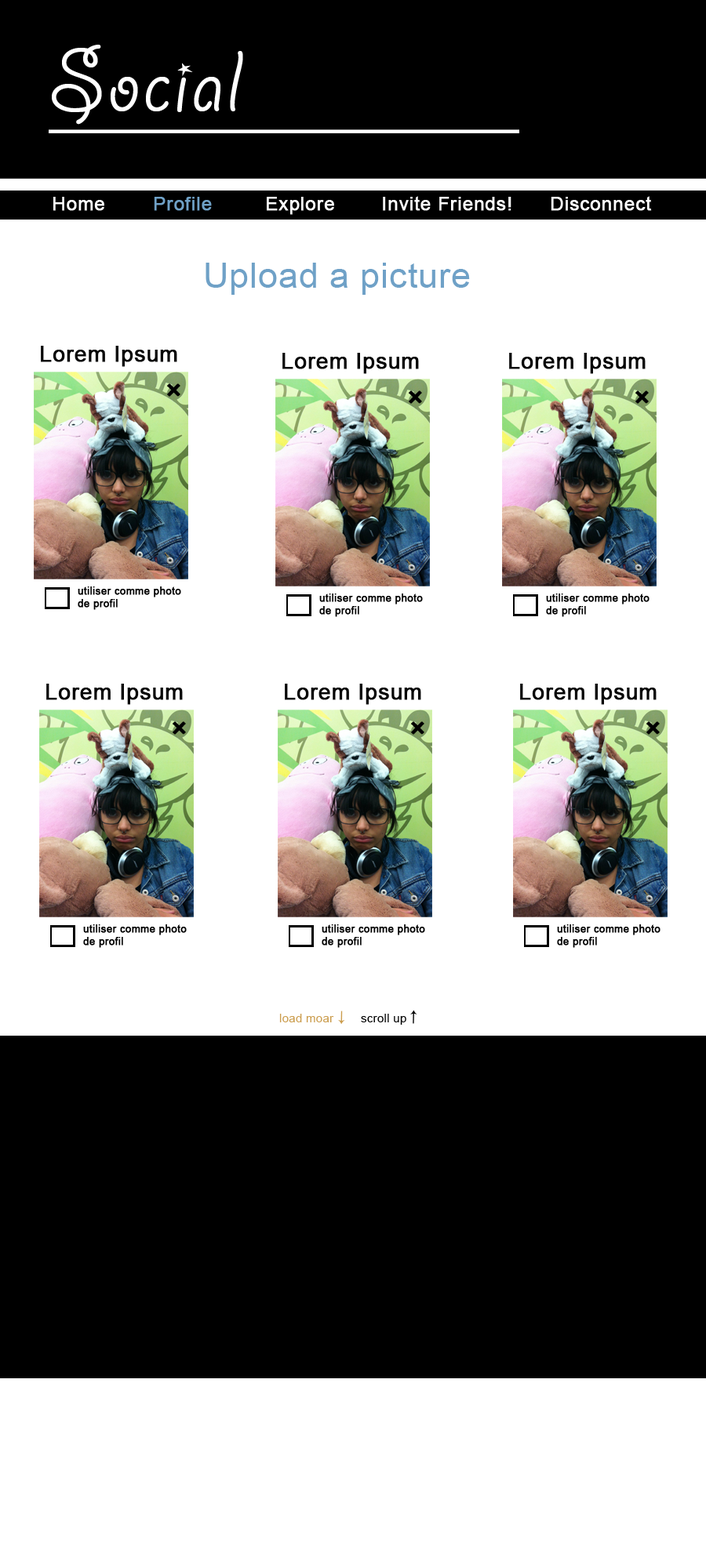
<style>
.page{position:relative;width:706px;height:1568px;background:#ffffff}
.page>*{position:absolute;margin:0}
.t1{font:97.2px "GiddyupStd";letter-spacing:0.02em;color:#ffffff}
.t2{font:18.8px "ArialMT";letter-spacing:0.02em;color:#ffffff;font-weight:bold}
.t3{font:18.8px "ArialMT";letter-spacing:0.02em;color:#6fa1c7;font-weight:bold}
.t4{font:35.3px "ArialMT";letter-spacing:0.02em;color:#6fa1c7}
.t5{font:22px "ArialMT";letter-spacing:0.02em;color:#050505;font-weight:bold}
.t6{font:30.6px "ArialMT";letter-spacing:0.02em;color:#000000;font-weight:bold}
.t7{font:10.2px "ArialMT";letter-spacing:0.02em;color:#000000;font-weight:bold}
.t8{font:11.8px "ArialMT";letter-spacing:0.02em;color:#cb9d4e}
.t9{font:11.8px "ArialMT";letter-spacing:0.02em;color:#000000}
</style>
<div class="page">
<p class="t1" style="left:52px;top:45px;width:191px;height:80px">Social</p>
<p class="t2" style="left:53px;top:197px;width:51px;height:14px">Home</p>
<p class="t3" style="left:154px;top:197px;width:58px;height:14px">Profile</p>
<p class="t2" style="left:267px;top:197px;width:67px;height:18px">Explore</p>
<p class="t2" style="left:383px;top:196px;width:128px;height:15px">Invite Friends!</p>
<p class="t2" style="left:550px;top:196px;width:102px;height:15px">Disconnect</p>
<p class="t4" style="left:205px;top:263px;width:265px;height:32px">Upload a picture</p>
<p class="t5" style="left:41px;top:346px;width:136px;height:21px">Lorem Ipsum</p>
<p class="t5" style="left:282px;top:353px;width:137px;height:21px">Lorem Ipsum</p>
<p class="t5" style="left:509px;top:353px;width:136px;height:21px">Lorem Ipsum</p>
<p class="t6" style="left:167px;top:383px;width:13px;height:14px;rotate:45deg">+</p>
<p class="t6" style="left:408px;top:390px;width:14px;height:14px;rotate:45deg">+</p>
<p class="t6" style="left:635px;top:390px;width:13px;height:14px;rotate:45deg">+</p>
<p class="t7" style="left:78px;top:586px;width:103px;height:24px">utiliser comme photo de profil</p>
<p class="t7" style="left:319px;top:593px;width:104px;height:24px">utiliser comme photo de profil</p>
<p class="t7" style="left:546px;top:593px;width:103px;height:24px">utiliser comme photo de profil</p>
<p class="t5" style="left:46px;top:684px;width:137px;height:21px">Lorem Ipsum</p>
<p class="t5" style="left:285px;top:684px;width:136px;height:21px">Lorem Ipsum</p>
<p class="t5" style="left:520px;top:684px;width:136px;height:21px">Lorem Ipsum</p>
<p class="t6" style="left:172px;top:721px;width:14px;height:14px;rotate:45deg">+</p>
<p class="t6" style="left:411px;top:721px;width:13px;height:14px;rotate:45deg">+</p>
<p class="t6" style="left:646px;top:721px;width:13px;height:14px;rotate:45deg">+</p>
<p class="t7" style="left:83px;top:924px;width:104px;height:24px">utiliser comme photo de profil</p>
<p class="t7" style="left:321px;top:924px;width:104px;height:24px">utiliser comme photo de profil</p>
<p class="t7" style="left:557px;top:924px;width:103px;height:24px">utiliser comme photo de profil</p>
<p class="t8" style="left:279px;top:1014px;width:55px;height:8px">load moar</p>
<p class="t9" style="left:361px;top:1014px;width:45px;height:11px">scroll up</p>
</div>
